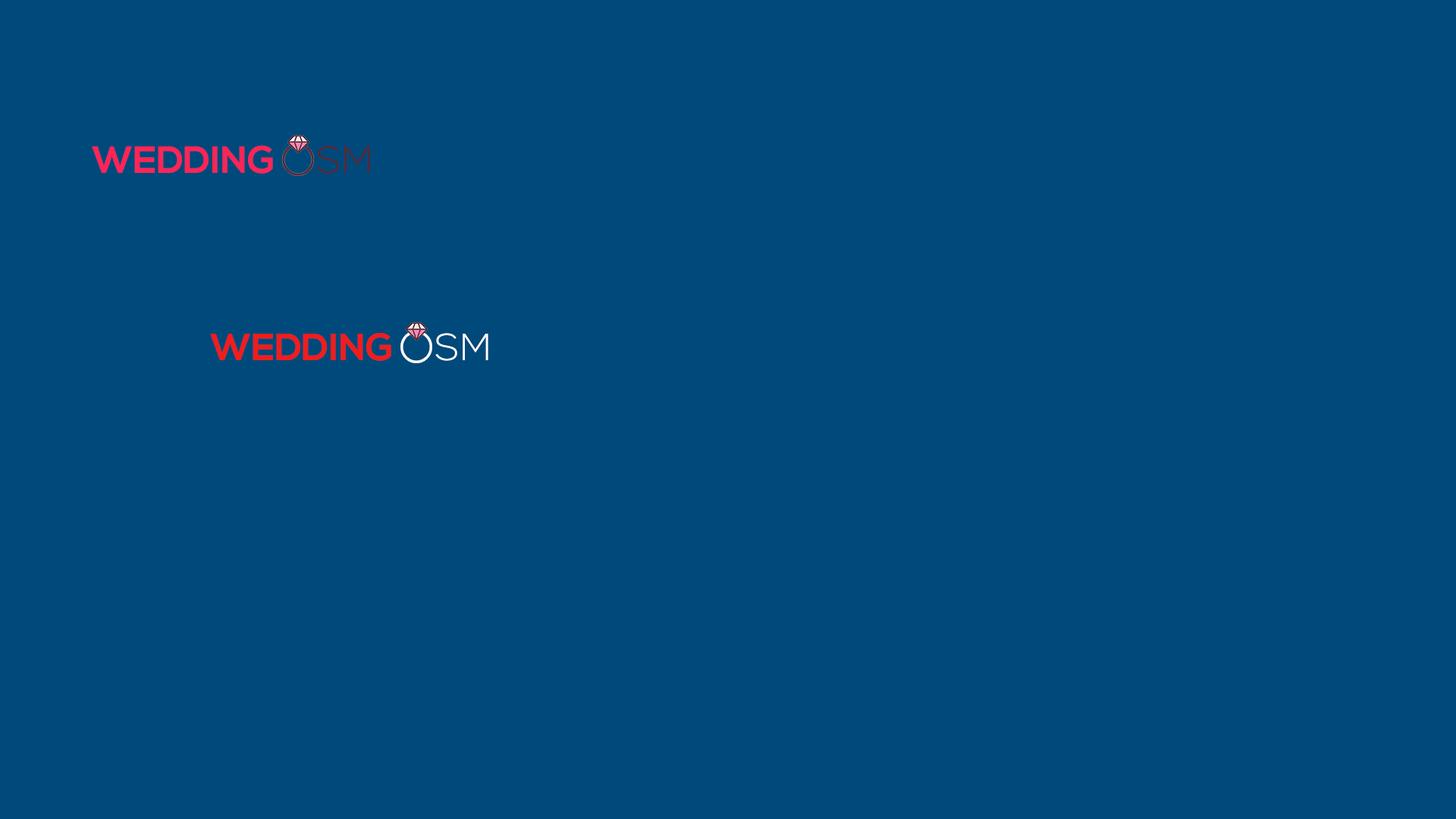
<style>
.page{position:relative;width:1456px;height:819px;background:#00497b}
.page>*{position:absolute;margin:0}
.t1{font:37.9px "NexaBold";color:#fc2557;text-transform:uppercase}
.t2{font:37.9px "NexaLight";letter-spacing:0.04em;color:#572731;text-transform:uppercase}
.t3{font:37.9px "NexaBold";color:#f01d1d;text-transform:uppercase}
.t4{font:37.9px "NexaLight";letter-spacing:0.04em;color:#ffffff;text-transform:uppercase}
</style>
<div class="page">
<p class="t1" style="left:92px;top:146px;width:278px;height:28px">Wedding    <span class="t2">SM</span></p>
<p class="t3" style="left:210px;top:333px;width:278px;height:28px">Wedding    <span class="t4">SM</span></p>
</div>
